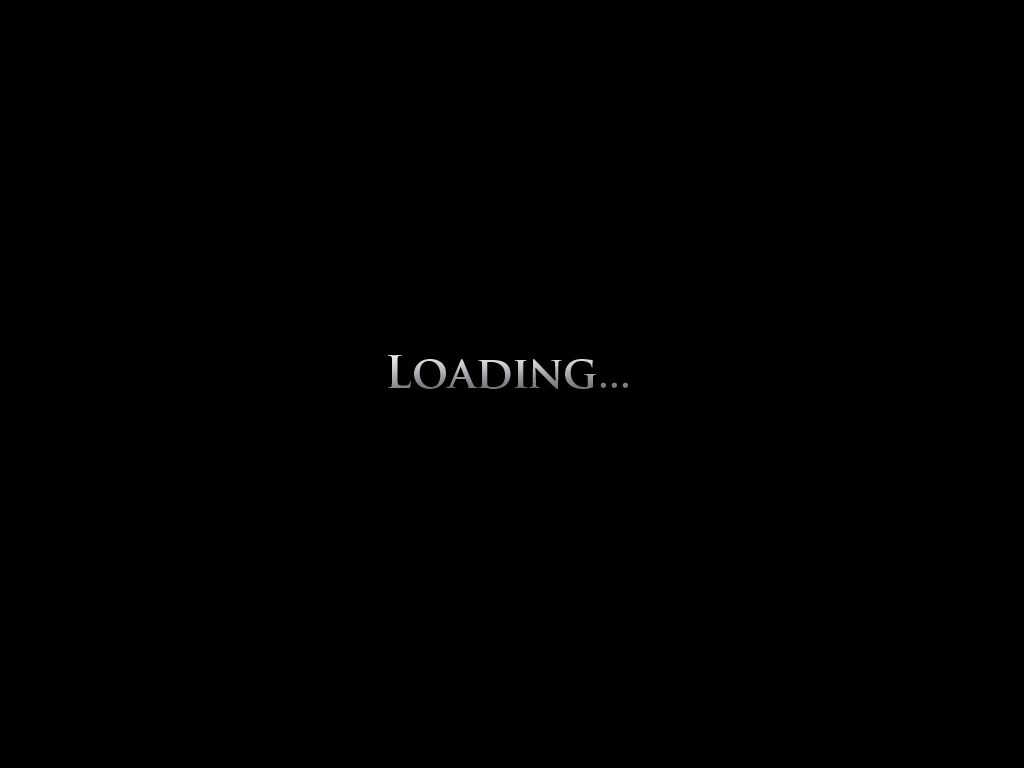
<style>
.page{position:relative;width:1024px;height:768px;background:#000000}
.page>*{position:absolute;margin:0}
.t1{font:44px "TrajanPro-Bold"}
</style>
<div class="page">
<p class="t1" style="left:387px;top:355px;width:241px;height:34px">Loading...</p>
</div>
